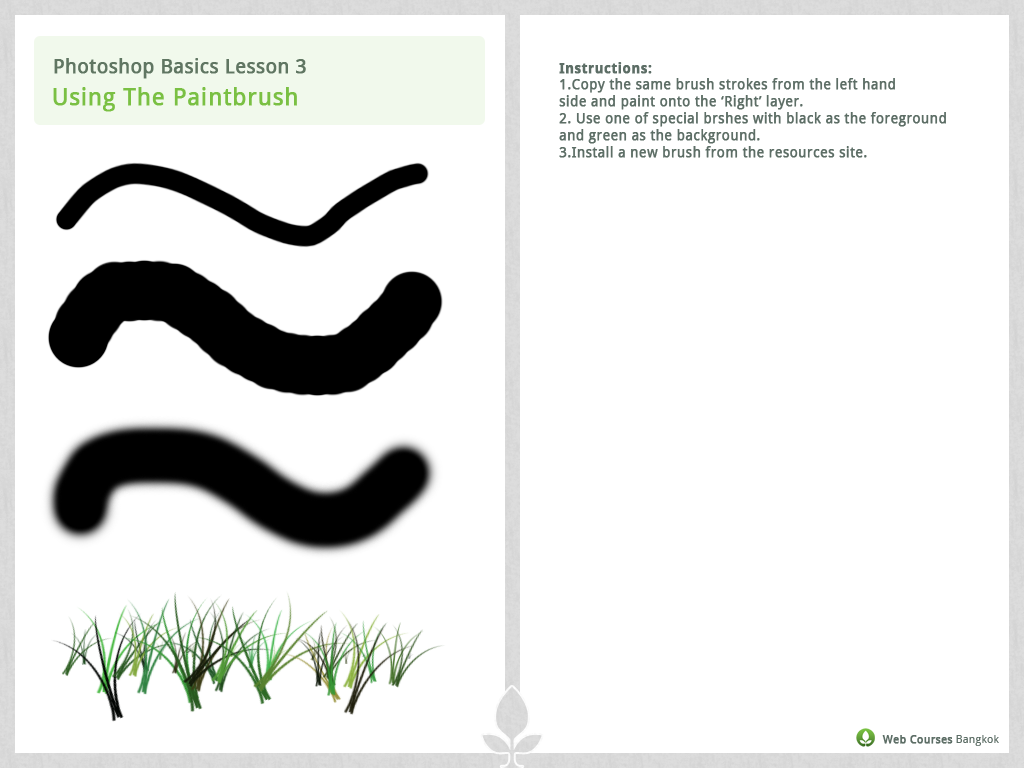
<style>
.page{position:relative;width:1024px;height:768px;background:#ffffff}
.page>*{position:absolute;margin:0}
.t1{font:19.6px "DroidSans";letter-spacing:0.01em;color:#5d6e66;font-weight:bold}
.t2{font:14px "DroidSans";letter-spacing:0.01em;color:#5d6e66;font-weight:bold}
.t3{font:14px "DroidSans-Bold";letter-spacing:0.01em;color:#5d6e66;font-weight:bold}
.t4{font:24px "DroidSans";letter-spacing:0.01em;color:#7ac043;font-weight:bold}
.t5{font:11.1px "DroidSans";letter-spacing:0.01em;color:#5d6e66;font-weight:bold}
.t6{font:11.1px "DroidSans";letter-spacing:0.01em;color:#5d6e66}
</style>
<div class="page">
<p class="t1" style="left:54px;top:58px;width:252px;height:21px">Photoshop Basics Lesson 3</p>
<p class="t2" style="left:559px;top:62px;width:387px;height:96px"><span class="t3">Instructions:<br></span>1.Copy the same brush strokes from the left hand <br>side and paint onto the ‘Right’ layer.<br>2. Use one of special brshes with black as the foreground and green as the background.<br>3.Install a new brush from the resources site.</p>
<p class="t4" style="left:53px;top:87px;width:244px;height:25px">Using The Paintbrush</p>
<p class="t5" style="left:882px;top:735px;width:117px;height:11px">Web Courses<span class="t6"> Bangkok</span></p>
</div>
